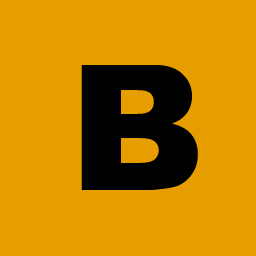
<style>
.page{position:relative;width:256px;height:256px;background:#e69d00}
.page>*{position:absolute;margin:0}
.t1{font:174.7px "Arial-Black";color:#010101}
</style>
<div class="page">
<p class="t1" style="left:81px;top:65px;width:117px;height:125px">B</p>
</div>
